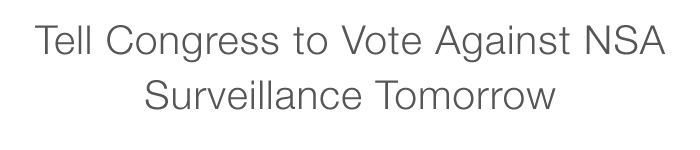
<style>
.page{position:relative;width:700px;height:150px;background:#ffffff}
.page>*{position:absolute;margin:0}
.t1{font:40px/55px "HelveticaNeue-Light";letter-spacing:0.03em;color:#565656}
</style>
<div class="page">
<p class="t1" style="left:35px;top:25px;width:631px;height:85px;text-align:center">Tell Congress to Vote Against NSA Surveillance Tomorrow</p>
</div>
